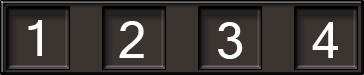
<style>
.page{position:relative;width:364px;height:75px;background:#3b3431}
.page>*{position:absolute;margin:0}
.t1{font:48px "Mangal";color:#ffffff;text-transform:uppercase;scale:1.03 1}
</style>
<div class="page">
<p class="t1" style="left:28px;top:20px;width:14px;height:36px">1</p>
<p class="t1" style="left:119px;top:21px;width:25px;height:37px">2</p>
<p class="t1" style="left:218px;top:22px;width:25px;height:37px">3</p>
<p class="t1" style="left:312px;top:22px;width:26px;height:36px">4</p>
</div>
